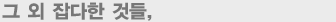
<style>
.page{position:relative;width:336px;height:22px;background:#ebebeb}
.page>*{position:absolute;margin:0}
.t1{font:19.2px "YDIYGO160-KSCPC-EUC-H";letter-spacing:-0.1em;color:#777777}
</style>
<div class="page">
<p class="t1" style="left:2px;top:2px;width:150px;height:19px">그 외 잡다한 것들,</p>
</div>
